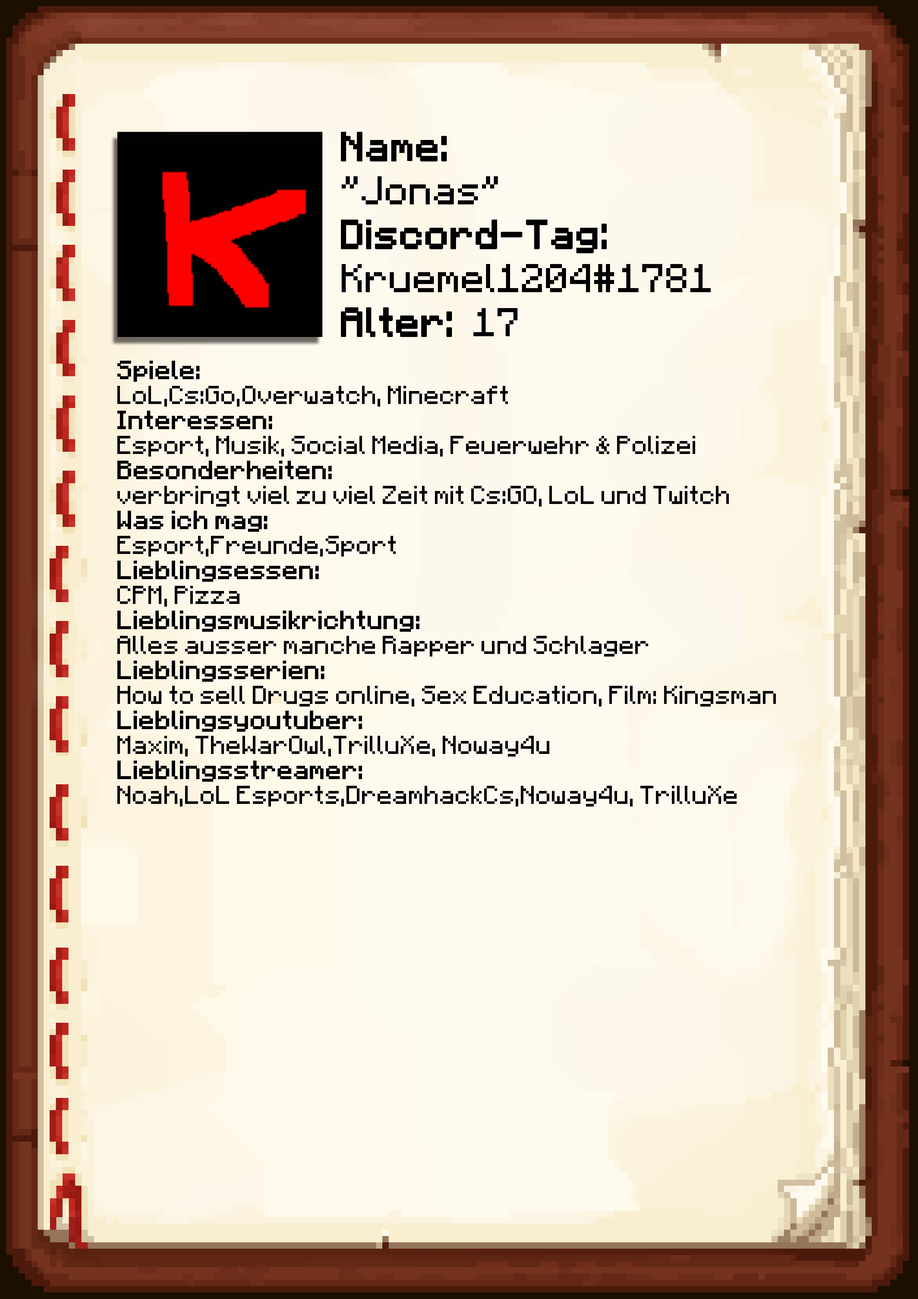
<style>
.page{position:relative;width:918px;height:1299px}
.page>*{position:absolute;margin:0}
.t1{font:40.1px/43.9px "Minecraft-Regular";color:#000000}
.t2{font:40.1px/43.9px "Minecraft-Regular";color:#000000;font-weight:bold}
.t3{font:20.8px "Minecraft";color:#000000}
.t4{font:20.8px "Minecraft";color:#000000;font-weight:bold}
</style>
<div class="page">
<p class="t1" style="left:341px;top:132px;width:370px;height:205px"><span class="t2">Name:<br></span>"Jonas"<br><span class="t2">Discord-Tag:<br></span>Kruemel1204#1781<br><span class="t2">Alter: </span>17</p>
<p class="t3" style="left:117px;top:361px;width:659px;height:445px"><span class="t4">Spiele: <br></span>LoL,Cs:Go,Overwatch, Minecraft<br><span class="t4">Interessen:<br></span>Esport, Musik, Social Media, Feuerwehr &amp; Polizei<br><span class="t4">Besonderheiten:<br></span>verbringt viel zu viel Zeit mit Cs:GO, LoL und Twitch<br><span class="t4">Was ich mag:<br></span>Esport,Freunde,Sport<br><span class="t4">Lieblingsessen:<br></span>CPM, Pizza<br><span class="t4">Lieblingsmusikrichtung:<br></span>Alles ausser manche Rapper und Schlager<br><span class="t4">Lieblingsserien:<br></span>How to sell Drugs online, Sex Education, Film: Kingsman<br><span class="t4">Lieblingsyoutuber:<br></span>Maxim, TheWarOwl,TrilluXe, Noway4u<br><span class="t4">Lieblingsstreamer:<br></span>Noah,LoL Esports,DreamhackCs,Noway4u, TrilluXe</p>
</div>
